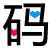
<style>
.page{position:relative;width:50px;height:50px;background:#ffffff}
.page>*{position:absolute;margin:0}
.t1{font:48px "MicrosoftYaHei";color:#000000}
</style>
<div class="page">
<p class="t1" style="left:2px;top:3px;width:47px;height:43px">码</p>
</div>
